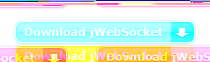
<style>
.page{position:relative;width:210px;height:62px;background:#ffffff}
.page>*{position:absolute;margin:0}
.t1{font:11px "Verdana-Bold";color:#ffffff}
</style>
<div class="page">
<p class="t1" style="left:24px;top:27px;width:139px;height:11px">Download jWebSocket</p>
<p class="t1" style="left:24px;top:26px;width:139px;height:11px">Download jWebSocket</p>
</div>
